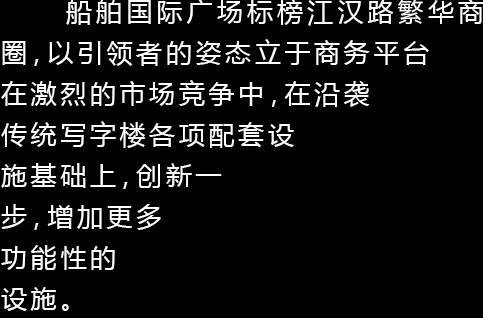
<style>
.page{position:relative;width:483px;height:318px;background:#000000}
.page>*{position:absolute;margin:0}
.t1{font:26px/41px "MicrosoftYaHei";letter-spacing:0.14em;color:#ffffff}
</style>
<div class="page">
<p class="t1" style="left:1px;top:0px;width:483px;height:311px;text-align:justify">船舶国际广场标榜江汉路繁华商圈，以引领者的姿态立于商务平台<br>在激烈的市场竞争中，在沿袭<br>传统写字楼各项配套设<br>施基础上，创新一<br>步，增加更多<br>功能性的<br>设施。</p>
</div>
